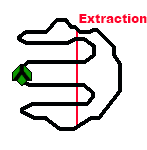
<style>
.page{position:relative;width:147px;height:150px;background:#ffffff}
.page>*{position:absolute;margin:0}
.t1{font:12px "Arial-Black";color:#ff022c}
</style>
<div class="page">
<p class="t1" style="left:79px;top:14px;width:68px;height:9px">Extraction</p>
</div>
